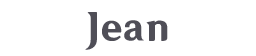
<style>
.page{position:relative;width:256px;height:56px;background:#ffffff}
.page>*{position:absolute;margin:0}
.t1{font:36px "HYWenHei-HEW";color:#4f4e57}
</style>
<div class="page">
<p class="t1" style="left:85px;top:12px;width:83px;height:38px">Jean</p>
</div>
